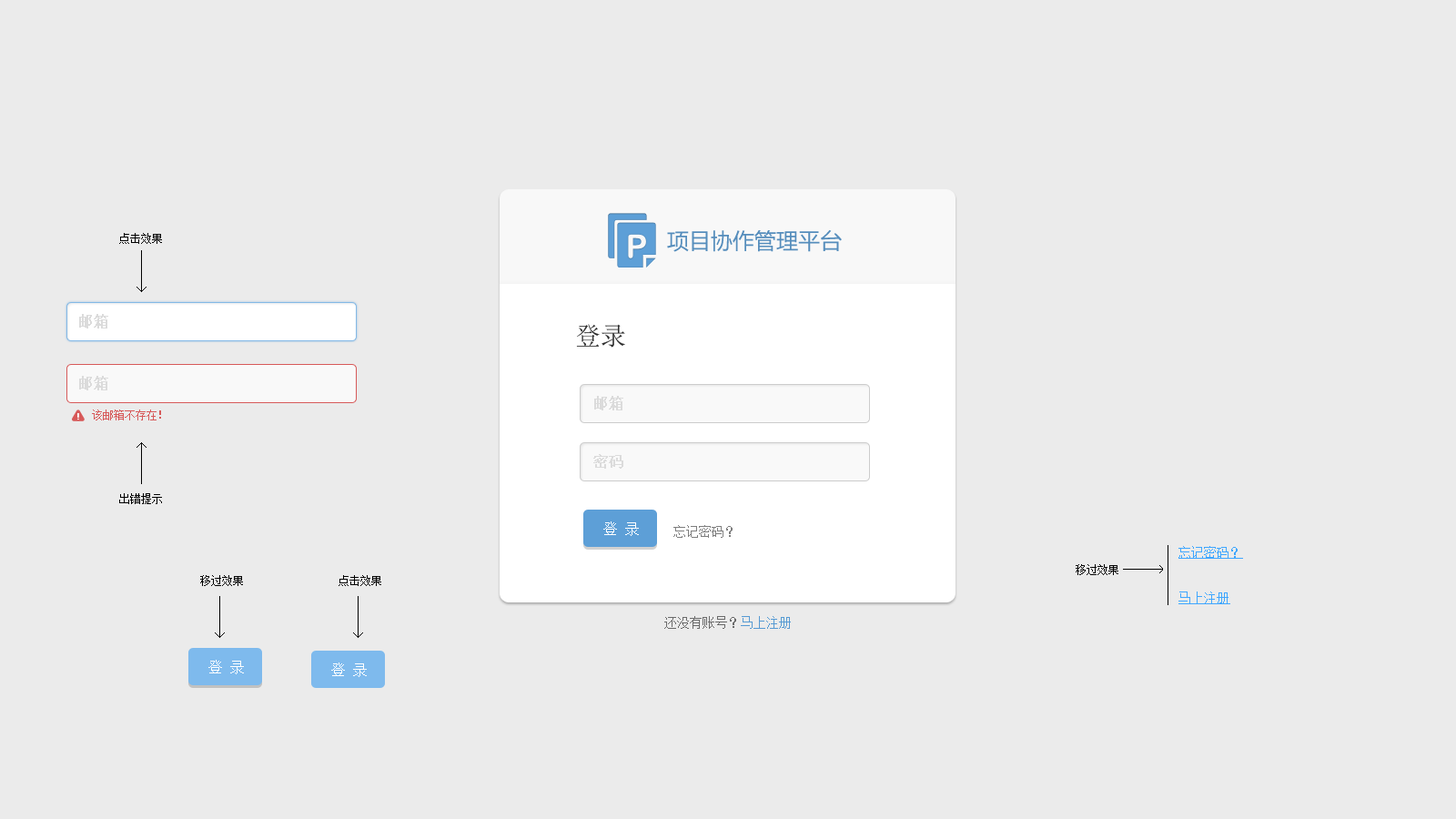
<style>
.page{position:relative;width:1456px;height:819px;background:#ebebeb}
.page>*{position:absolute;margin:0}
.t1{font:10.9px "SimSun";color:#000000}
.t2{font:21.8px "MicrosoftYaHei";color:#548cbb}
.t3{font:14.6px "SimSun";color:#dbdbdb;font-weight:bold}
.t4{font:25.5px "SimSun";color:#2c2c2c}
.t5{font:9.1px "ArialMT";color:#fefefe;font-weight:bold}
.t6{font:10.9px "SimSun";color:#d75959}
.t7{font:14.6px "SimSun";color:#ffffff}
.t8{font:12.7px "SimSun";color:#7e7e7e}
.t9{font:12.7px "SimSun";color:#3ea6ff;text-decoration:underline}
.t10{font:12.7px "SimSun";color:#6a6a6a}
.t11{font:12.7px "SimSun";color:#569ad3}
</style>
<div class="page">
<p class="t1" style="left:119px;top:233px;width:43px;height:11px">点击效果</p>
<p class="t2" style="left:667px;top:229px;width:175px;height:23px">项目协作管理平台</p>
<p class="t3" style="left:79px;top:314px;width:29px;height:15px">邮箱</p>
<p class="t4" style="left:576px;top:324px;width:49px;height:24px">登录</p>
<p class="t3" style="left:79px;top:376px;width:29px;height:14px">邮箱</p>
<p class="t3" style="left:594px;top:396px;width:29px;height:14px">邮箱</p>
<p class="t5" style="left:77px;top:413px;width:2px;height:7px">!</p>
<p class="t6" style="left:92px;top:409px;width:69px;height:11px">该邮箱不存在！</p>
<p class="t3" style="left:593px;top:454px;width:30px;height:15px">密码</p>
<p class="t1" style="left:119px;top:493px;width:43px;height:11px">出错提示</p>
<p class="t7" style="left:603px;top:521px;width:36px;height:15px">登 录</p>
<p class="t8" style="left:673px;top:525px;width:60px;height:13px">忘记密码？</p>
<p class="t9" style="left:1178px;top:546px;width:65px;height:13px">忘记密码？</p>
<p class="t1" style="left:1076px;top:564px;width:42px;height:11px">移过效果</p>
<p class="t1" style="left:200px;top:575px;width:43px;height:11px">移过效果</p>
<p class="t1" style="left:339px;top:575px;width:42px;height:11px">点击效果</p>
<p class="t9" style="left:1178px;top:591px;width:52px;height:13px">马上注册</p>
<p class="t10" style="left:664px;top:616px;width:127px;height:13px">还没有账号？<span class="t11">马上注册</span></p>
<p class="t7" style="left:208px;top:660px;width:36px;height:14px">登 录</p>
<p class="t7" style="left:331px;top:662px;width:36px;height:15px">登 录</p>
</div>
